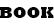
<style>
.page{position:relative;width:54px;height:26px;background:#ffffff}
.page>*{position:absolute;margin:0}
.t1{font:16px "Rockwell-ExtraBold";color:#050505}
</style>
<div class="page">
<p class="t1" style="left:0px;top:7px;width:54px;height:11px">BOOK</p>
</div>
